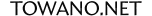
<style>
.page{position:relative;width:152px;height:16px;background:#ffffff}
.page>*{position:absolute;margin:0}
.t1{font:19.7px "Amira-Roman";color:#000000}
</style>
<div class="page">
<p class="t1" style="left:10px;top:1px;width:132px;height:15px;opacity:0.96">TOWANO.NET</p>
</div>
